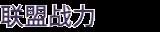
<style>
.page{position:relative;width:160px;height:32px;background:#000000}
.page>*{position:absolute;margin:0}
.t1{font:24px "WebPSD-18463539-0-Regular";color:#3f3254;font-weight:bold}
</style>
<div class="page">
<p class="t1" style="left:0px;top:0px;width:160px;height:32px">联盟战力</p>
</div>
